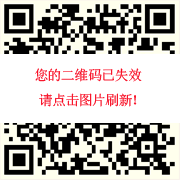
<style>
.page{position:relative;width:180px;height:180px;background:#ffffff}
.page>*{position:absolute;margin:0}
.t1{font:14px "SimSun";letter-spacing:0.05em;color:#f8061d}
</style>
<div class="page">
<p class="t1" style="left:35px;top:68px;width:107px;height:14px">您的二维码已失效</p>
<p class="t1" style="left:39px;top:93px;width:98px;height:14px">请点击图片刷新！</p>
</div>
